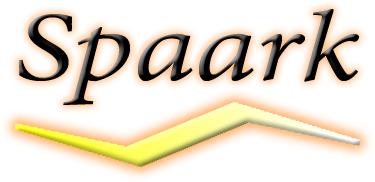
<style>
.page{position:relative;width:375px;height:182px;background:#ffffff}
.page>*{position:absolute;margin:0}
.t1{font:100px "MinionPro-It";color:#000000;scale:1.27 1}
</style>
<div class="page">
<p class="t1" style="left:19px;top:9px;width:340px;height:96px">Spaark</p>
</div>
